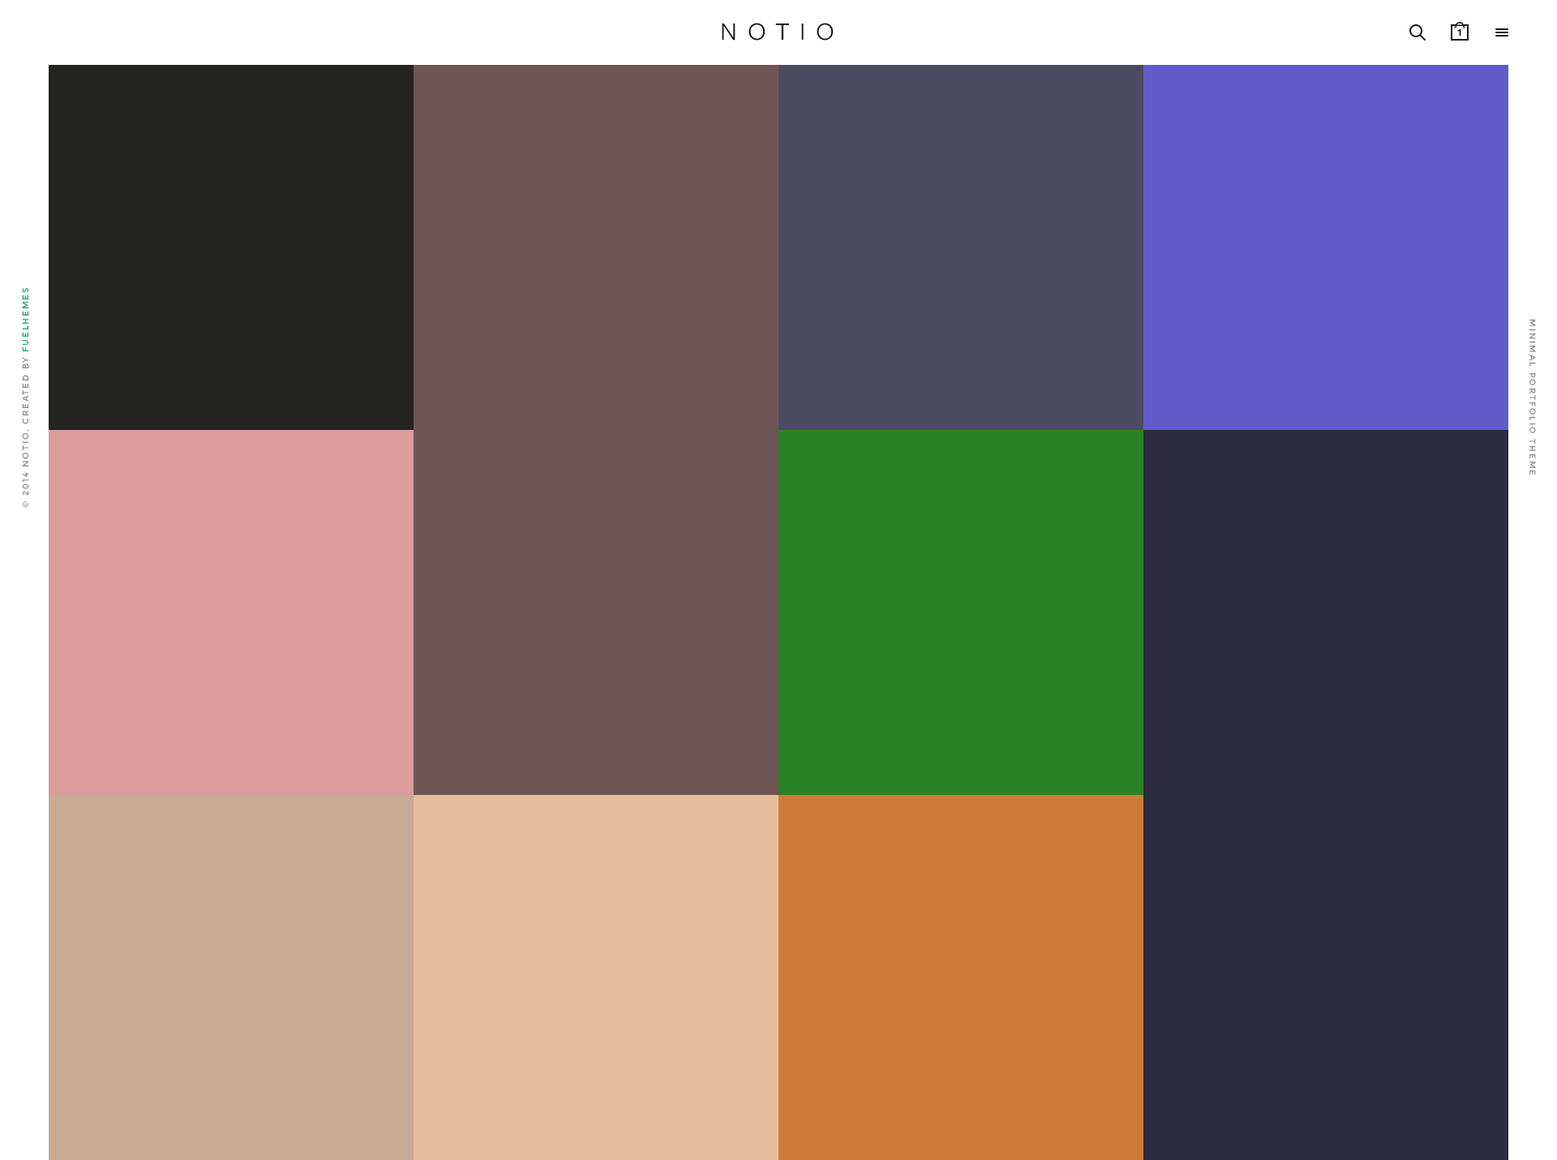
<style>
.page{position:relative;width:1557px;height:1160px}
.page>*{position:absolute;margin:0}
.t1{font:26px "FreightSansProBook-Regular";letter-spacing:0.4em;color:#121212}
.t2{font:9.7px "Hind-Bold";letter-spacing:0.2em;color:#151515;text-transform:uppercase}
.t3{font:8.3px "Montserrat-Regular";letter-spacing:0.2em;color:#909090;text-transform:uppercase}
.t4{font:8.3px "Montserrat-Regular";letter-spacing:0.2em;color:#1aa97f;text-transform:uppercase}
.t5{font:8.2px "Montserrat-Regular";letter-spacing:0.2em;color:#909090}
</style>
<div class="page">
<p class="t1" style="left:722px;top:23px;width:112px;height:18px">NOTIO</p>
<p class="t2" style="left:1457px;top:29px;width:4px;height:7px">1</p>
<p class="t3" style="left:22px;top:288px;width:7px;height:220px;rotate:-90deg">© 2014 NOTIO. Created by <span class="t4">FUELhemes</span></p>
<p class="t5" style="left:1530px;top:319px;width:6px;height:156px;rotate:90deg">MINIMAL PORTFOLIO THEME</p>
</div>
